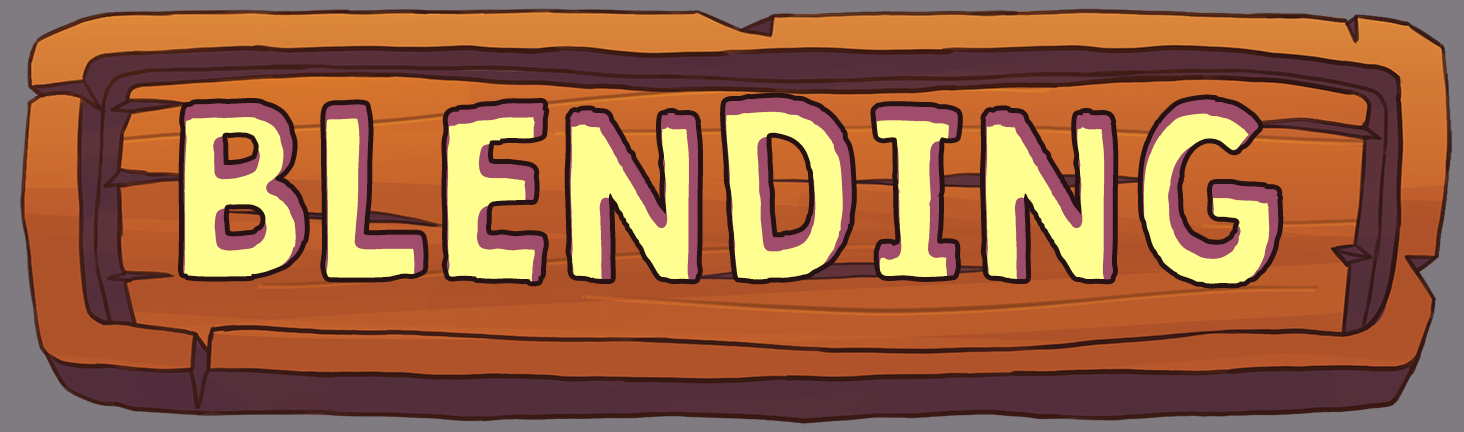
<style>
.page{position:relative;width:1464px;height:432px}
.page>*{position:absolute;margin:0}
.t1{font:220.6px "GranstanderClean";color:#ffff91;text-transform:uppercase}
</style>
<div class="page">
<p class="t1" style="left:183px;top:97px;width:1096px;height:187px">BLENDING</p>
</div>
